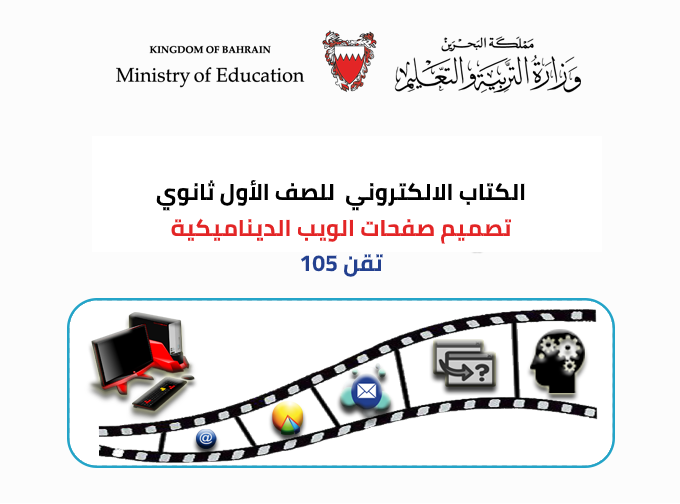
<style>
.page{position:relative;width:680px;height:504px;background:#fcfcfc}
.page>*{position:absolute;margin:0}
.t1{font:23px "Cairo-Bold";color:#000000}
.t2{font:23px "Cairo-Bold";color:#e32526}
.t3{font:23px "Cairo-Bold";color:#23408f}
</style>
<div class="page">
<p class="t1" style="left:156px;top:180px;width:369px;height:97px;text-align:center">الكتاب الالكتروني  للصف الأول ثانوي<br><span class="t2">تصميم صفحات الويب الديناميكية<br></span><span class="t3">تقن 105</span></p>
</div>
